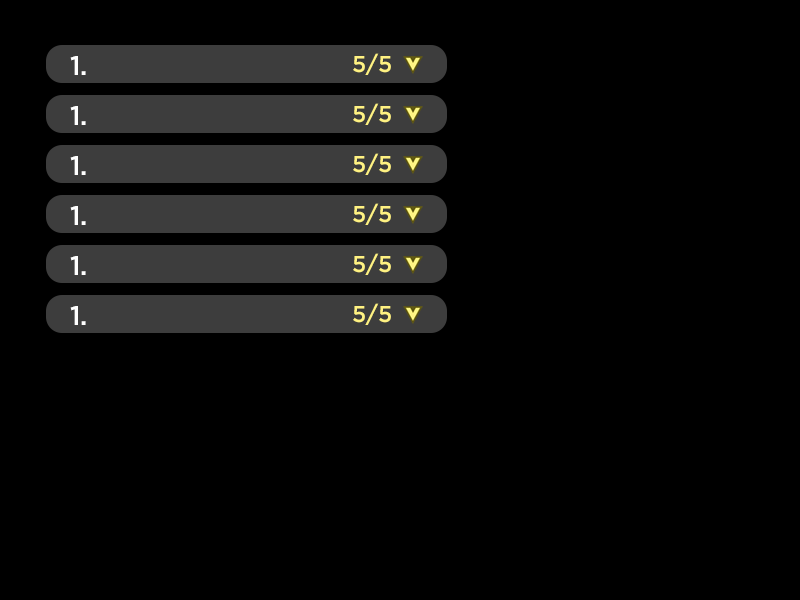
<style>
.page{position:relative;width:800px;height:600px;background:#000000}
.page>*{position:absolute;margin:0}
.t1{font:22.9px "Gotham-Medium";color:#fff282}
.t2{font:27px "Gotham-Medium";color:#ffffff}
</style>
<div class="page">
<p class="t1" style="left:353px;top:53px;width:38px;height:22px">5/5</p>
<p class="t2" style="left:70px;top:56px;width:16px;height:19px">1.</p>
<p class="t2" style="left:70px;top:106px;width:16px;height:19px">1.</p>
<p class="t1" style="left:353px;top:103px;width:38px;height:22px">5/5</p>
<p class="t2" style="left:70px;top:156px;width:16px;height:19px">1.</p>
<p class="t1" style="left:353px;top:153px;width:38px;height:22px">5/5</p>
<p class="t2" style="left:70px;top:206px;width:16px;height:19px">1.</p>
<p class="t1" style="left:353px;top:203px;width:38px;height:22px">5/5</p>
<p class="t2" style="left:70px;top:256px;width:16px;height:19px">1.</p>
<p class="t1" style="left:353px;top:253px;width:38px;height:22px">5/5</p>
<p class="t1" style="left:353px;top:303px;width:38px;height:22px">5/5</p>
<p class="t2" style="left:70px;top:306px;width:16px;height:19px">1.</p>
</div>
